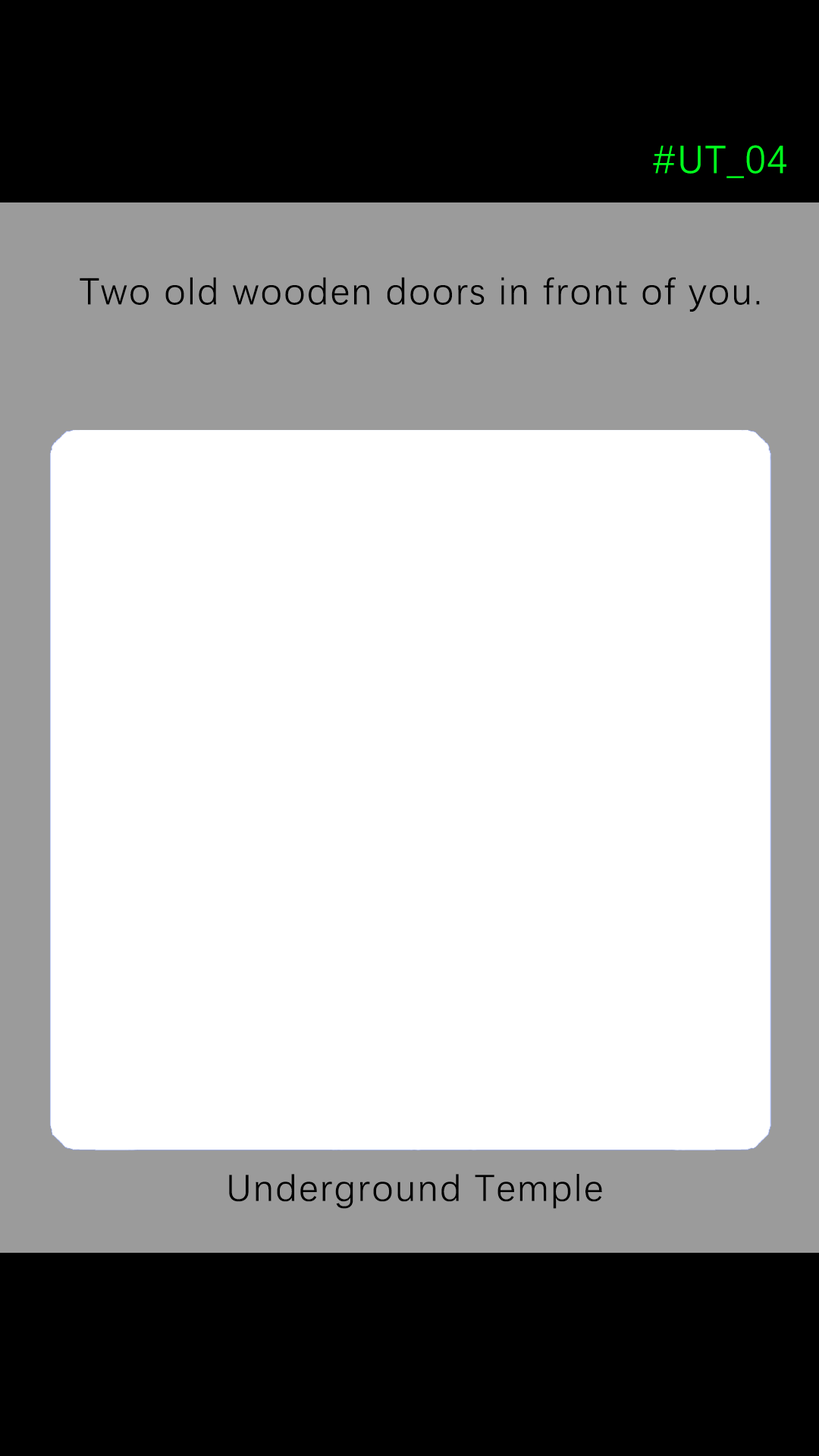
<style>
.page{position:relative;width:819px;height:1456px;background:#ffffff}
.page>*{position:absolute;margin:0}
.t1{font:39.2px "DengXian-Regular";letter-spacing:0.04em;color:#00ff1e}
.t2{font:37.9px "DengXian-Regular";letter-spacing:0.04em;color:#000000}
</style>
<div class="page">
<p class="t1" style="left:653px;top:145px;width:133px;height:33px">#UT_04</p>
<p class="t2" style="left:80px;top:277px;width:680px;height:35px">Two old wooden doors in front of you.</p>
<p class="t2" style="left:229px;top:1174px;width:373px;height:35px">Underground Temple</p>
</div>
